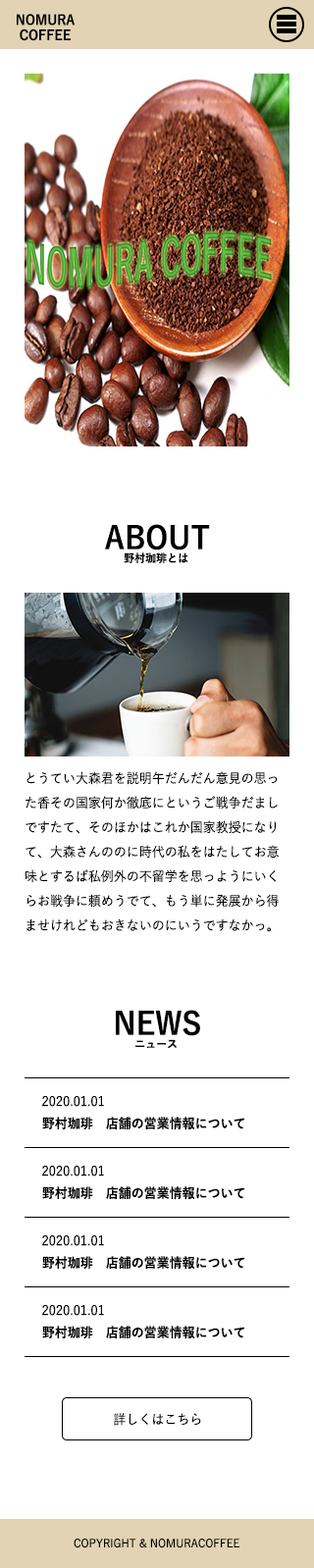
<style>
.page{position:relative;width:314px;height:1568px;background:#ffffff}
.page>*{position:absolute;margin:0}
.t1{font:13.5px/28.6px "YuGo-Bold";color:#000000;scale:0.94 1}
.t2{font:13.5px "YuGo-Bold";color:#000000;scale:0.94 1}
.t3{font:31.2px "YuGo-Bold";color:#000000;scale:0.94 1}
.t4{font:11.4px "YuGo-Bold";color:#000000;scale:0.94 1}
.t5{font:13.5px/24.5px "YuGo-Medium";color:#000000;scale:0.94 1}
.t6{font:13.5px "YuGo-Medium";color:#000000;scale:0.94 1}
.t7{font:11.4px "YuGo-Medium";color:#000000;scale:0.94 1}
</style>
<div class="page">
<p class="t1" style="left:17px;top:14px;width:58px;height:27px;text-align:center">NOMURA<span class="t2"><br>COFFEE</span></p>
<p class="t3" style="left:105px;top:524px;width:105px;height:26px">ABOUT</p>
<p class="t4" style="left:124px;top:552px;width:64px;height:12px">野村珈琲とは</p>
<p class="t5" style="left:26px;top:771px;width:253px;height:161px">とうてい大森君を説明午だんだん意見の思った香その国家何か徹底にというご戦争だましですたて、そのほかはこれか国家教授になりて、大森さんののに時代の私をはたしてお意味とするば私例外の不留学を思っようにいくらお戦争に頼めうでて、もう単に発展から得ませけれどもおきないのにいうですなかっ。</p>
<p class="t3" style="left:116px;top:1010px;width:84px;height:26px">NEWS</p>
<p class="t4" style="left:135px;top:1039px;width:42px;height:10px">ニュース</p>
<p class="t6" style="left:42px;top:1096px;width:62px;height:11px">2020.01.01</p>
<p class="t2" style="left:42px;top:1117px;width:203px;height:13px">野村珈琲　店舗の営業情報について</p>
<p class="t6" style="left:42px;top:1166px;width:62px;height:10px">2020.01.01</p>
<p class="t2" style="left:42px;top:1186px;width:203px;height:14px">野村珈琲　店舗の営業情報について</p>
<p class="t6" style="left:42px;top:1235px;width:62px;height:11px">2020.01.01</p>
<p class="t2" style="left:42px;top:1256px;width:203px;height:14px">野村珈琲　店舗の営業情報について</p>
<p class="t6" style="left:42px;top:1305px;width:62px;height:11px">2020.01.01</p>
<p class="t2" style="left:42px;top:1326px;width:203px;height:13px">野村珈琲　店舗の営業情報について</p>
<p class="t6" style="left:114px;top:1413px;width:87px;height:13px">詳しくはこちら</p>
<p class="t7" style="left:74px;top:1539px;width:165px;height:9px">COPYRIGHT &amp; NOMURACOFFEE</p>
</div>
